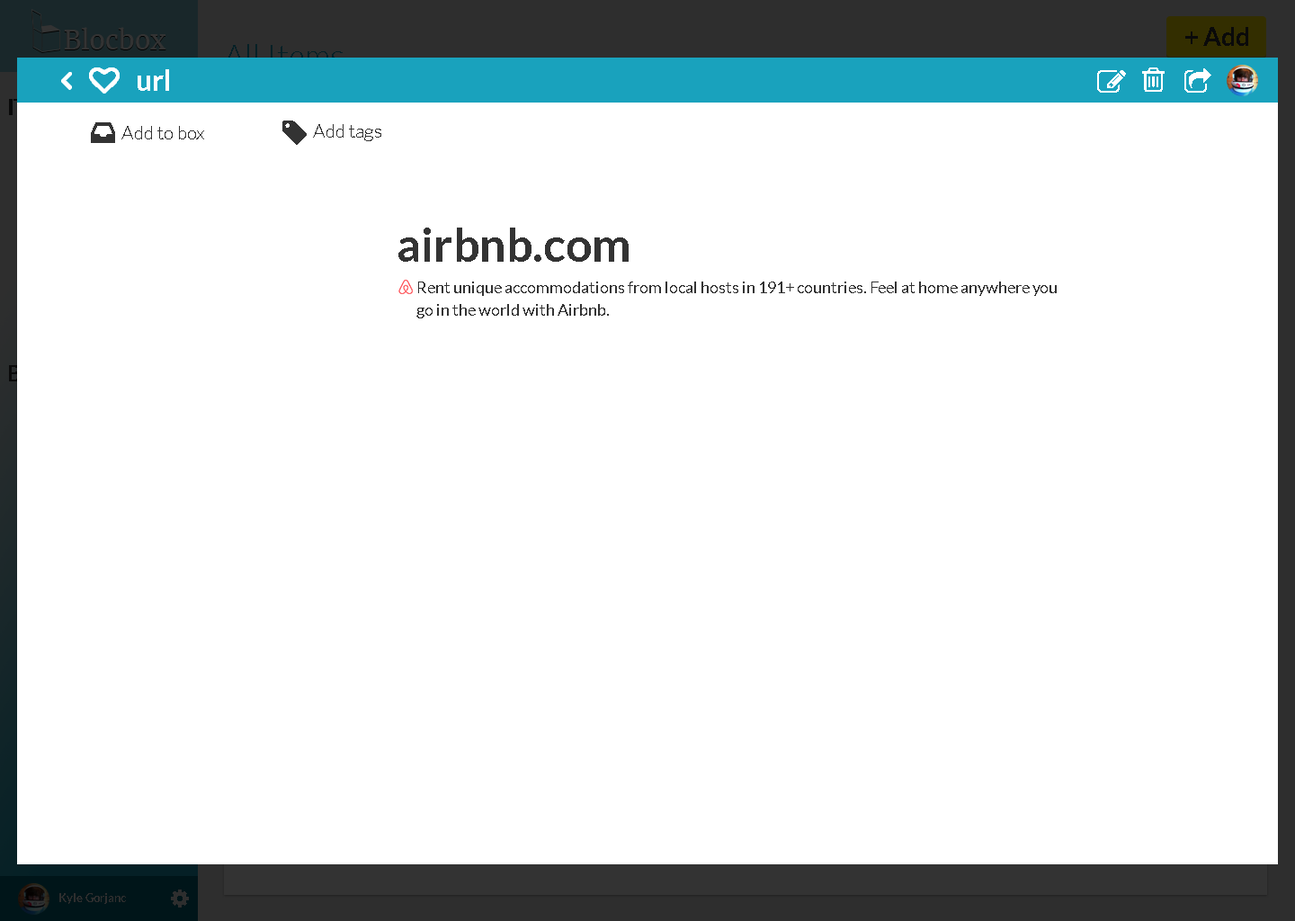
<style>
.page{position:relative;width:1295px;height:921px;background:#ffffff}
.page>*{position:absolute;margin:0}
.t1{font:25.6px "Lato-Bold";color:#0a0a0a}
.t2{font:32.4px "Lato-Light"}
.t3{font:28.8px "Lato-Bold";color:#ffffff}
.t4{font:19.2px "Lato-Light";color:#333333}
.t5{font:46.8px "Lato-Bold";color:#333333}
.t6{font:16.2px/22.4px "Lato-Regular";color:#333333}
.t7{font:11.7px "Lato-Bold";color:#2e2e2e}
</style>
<div class="page">
<p class="t1" style="left:1185px;top:27px;width:63px;height:19px">+ Add</p>
<p class="t2" style="left:224px;top:44px;width:119px;height:23px">All Items</p>
<p class="t3" style="left:138px;top:69px;width:31px;height:22px">url</p>
<p class="t4" style="left:121px;top:126px;width:83px;height:13px">Add to box</p>
<p class="t4" style="left:313px;top:124px;width:68px;height:17px">Add tags</p>
<p class="t5" style="left:398px;top:228px;width:231px;height:34px">airbnb.com</p>
<p class="t6" style="left:416px;top:281px;width:641px;height:37px;text-align:justify">Rent unique accommodations from local hosts in 191+ countries. Feel at home anywhere you <br>go in the world with Airbnb.</p>
<p class="t7" style="left:59px;top:893px;width:67px;height:11px">Kyle Gorjanc</p>
</div>
